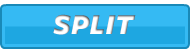
<style>
.page{position:relative;width:190px;height:49px;background:#35baf3}
.page>*{position:absolute;margin:0}
.t1{font:30px "FreightSansBlackItalic";text-transform:uppercase}
</style>
<div class="page">
<p class="t1" style="left:53px;top:14px;width:83px;height:21px">split</p>
</div>
